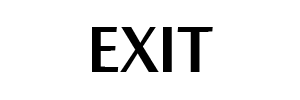
<style>
.page{position:relative;width:300px;height:100px;background:#ffffff}
.page>*{position:absolute;margin:0}
.t1{font:100px "MoolBoran";color:#000000}
</style>
<div class="page">
<p class="t1" style="left:92px;top:27px;width:121px;height:45px">EXIT</p>
</div>
